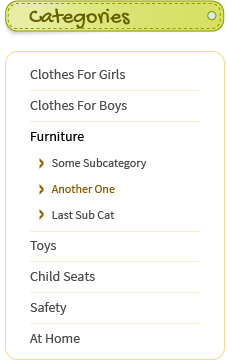
<style>
.page{position:relative;width:227px;height:360px;background:#ffffff}
.page>*{position:absolute;margin:0}
.t1{font:22px "GochiHand-Regular";color:#665f00}
.t2{font:14px/31px "SourceSansPro-Regular";color:#4d4d4d}
.t3{font:14px/31px "SourceSansPro-Regular";color:#000000}
.t4{font:12px/26px "SourceSansPro-Regular";color:#4d4d4d}
.t5{font:12px/26px "SourceSansPro-Regular";color:#8a5c00}
</style>
<div class="page">
<p class="t1" style="left:29px;top:8px;width:101px;height:21px">Categories</p>
<p class="t2" style="left:29px;top:69px;width:118px;height:274px">Clothes For Girls<br>Clothes For Boys<br><span class="t3">Furniture<br></span><span class="t4">         Some Subcategory<br>         </span><span class="t5">Another One<br></span><span class="t4">         Last Sub Cat<br></span>Toys<br>Child Seats<br>Safety<br>At Home</p>
</div>
